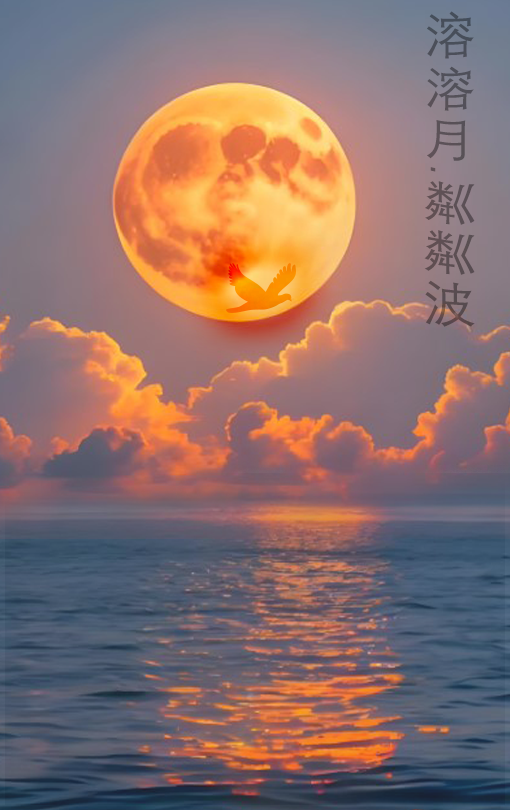
<style>
.page{position:relative;width:510px;height:810px}
.page>*{position:absolute;margin:0}
.t1{font:53.4px "DengXian";letter-spacing:0.1em;color:#5a4f56;scale:0.88 1}
.t2{font:46.8px "DengXian";letter-spacing:0.1em;color:#5a4f56;scale:1.14 1}
</style>
<div class="page">
<p class="t1" style="left:424px;top:11px;width:51px;height:316px;text-align:center">溶溶月<span class="t2">.</span>粼粼波</p>
</div>
